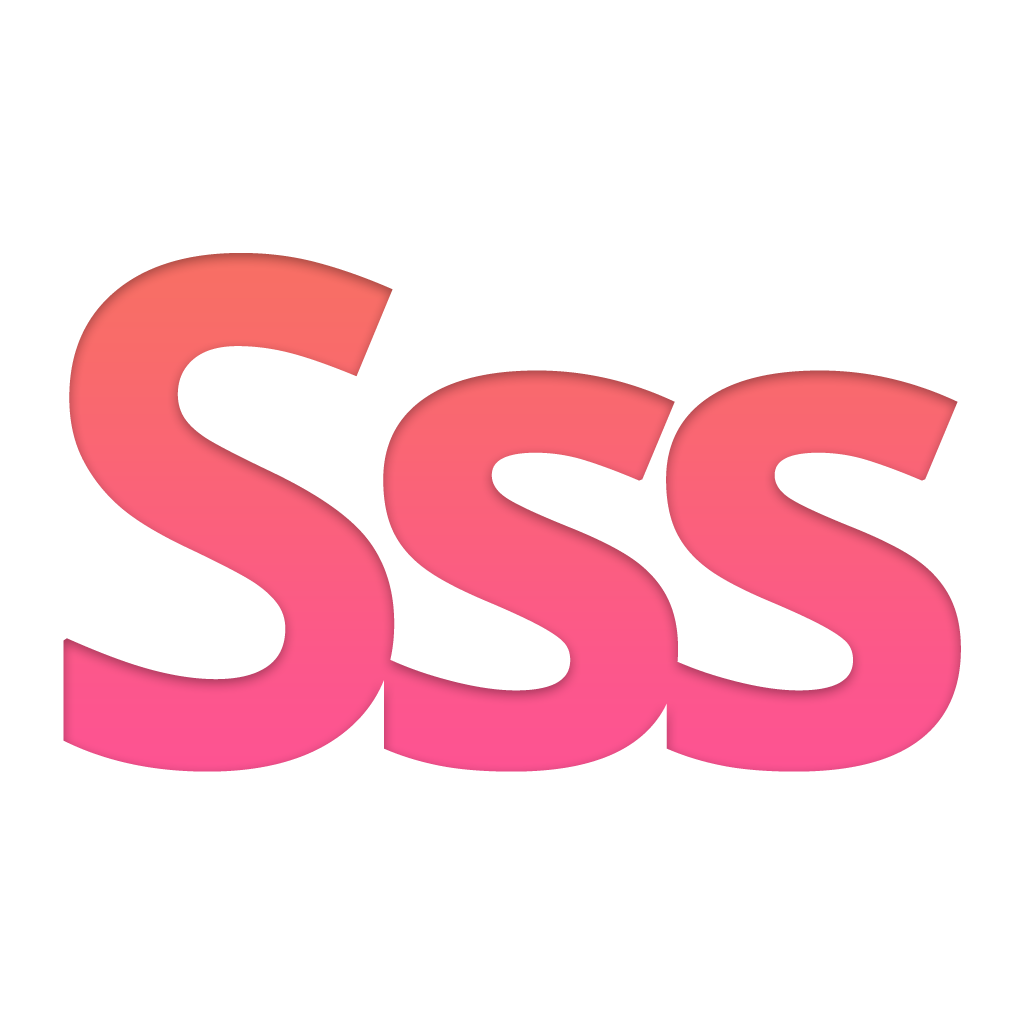
<style>
.page{position:relative;width:1024px;height:1024px;background:#ffffff}
.page>*{position:absolute;margin:0}
.t1{font:700px "NotoSans-Bold";letter-spacing:-0.12em;color:#fa5d7e;font-weight:bold}
</style>
<div class="page">
<p class="t1" style="left:63px;top:253px;width:898px;height:519px">Sss</p>
</div>
